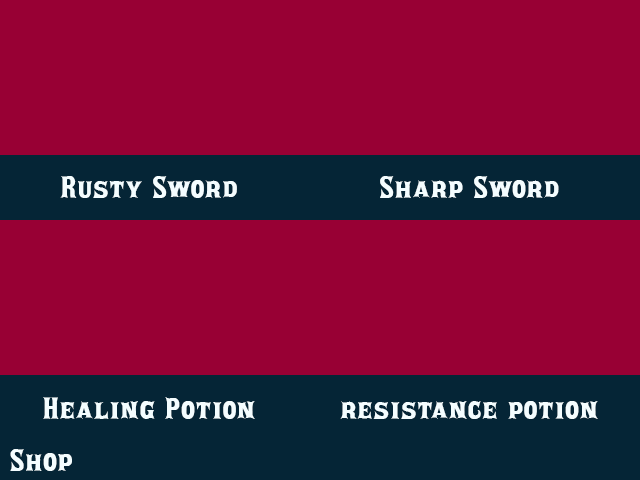
<style>
.page{position:relative;width:640px;height:480px;background:#980034}
.page>*{position:absolute;margin:0}
.t1{font:29.2px "P22Posada-Regular";letter-spacing:0.05em;color:#f4fdff;scale:1.05 1}
</style>
<div class="page">
<p class="t1" style="left:60px;top:176px;width:177px;height:22px">Rusty Sword</p>
<p class="t1" style="left:380px;top:176px;width:179px;height:22px">Sharp Sword</p>
<p class="t1" style="left:43px;top:397px;width:212px;height:22px">Healing Potion</p>
<p class="t1" style="left:340px;top:401px;width:258px;height:18px">resistance potion</p>
<p class="t1" style="left:10px;top:449px;width:62px;height:22px">Shop</p>
</div>
